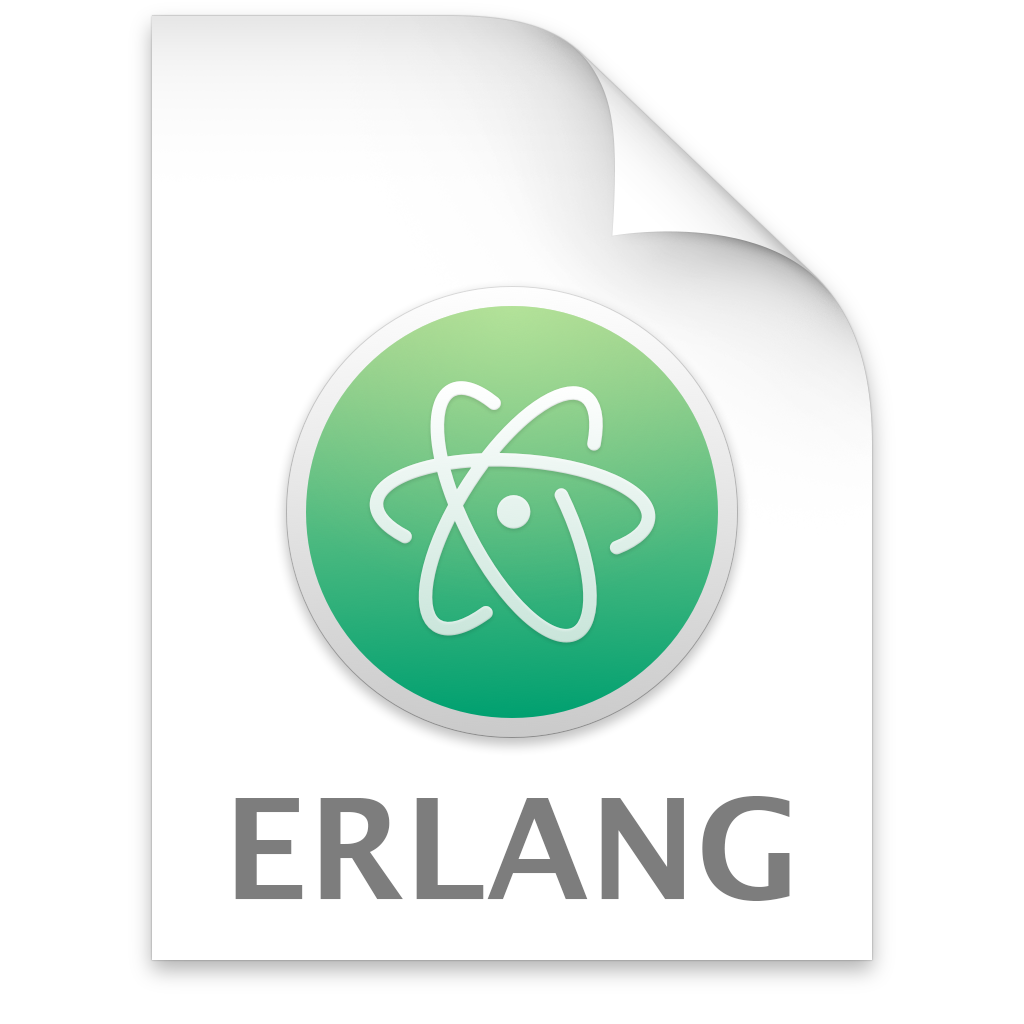
<style>
.page{position:relative;width:1024px;height:1024px;background:#ffffff}
.page>*{position:absolute;margin:0}
.t1{font:140px "LucidaGrande-Bold";color:#7d7d7d}
</style>
<div class="page">
<p class="t1" style="left:235px;top:796px;width:555px;height:105px">ERLANG</p>
</div>
